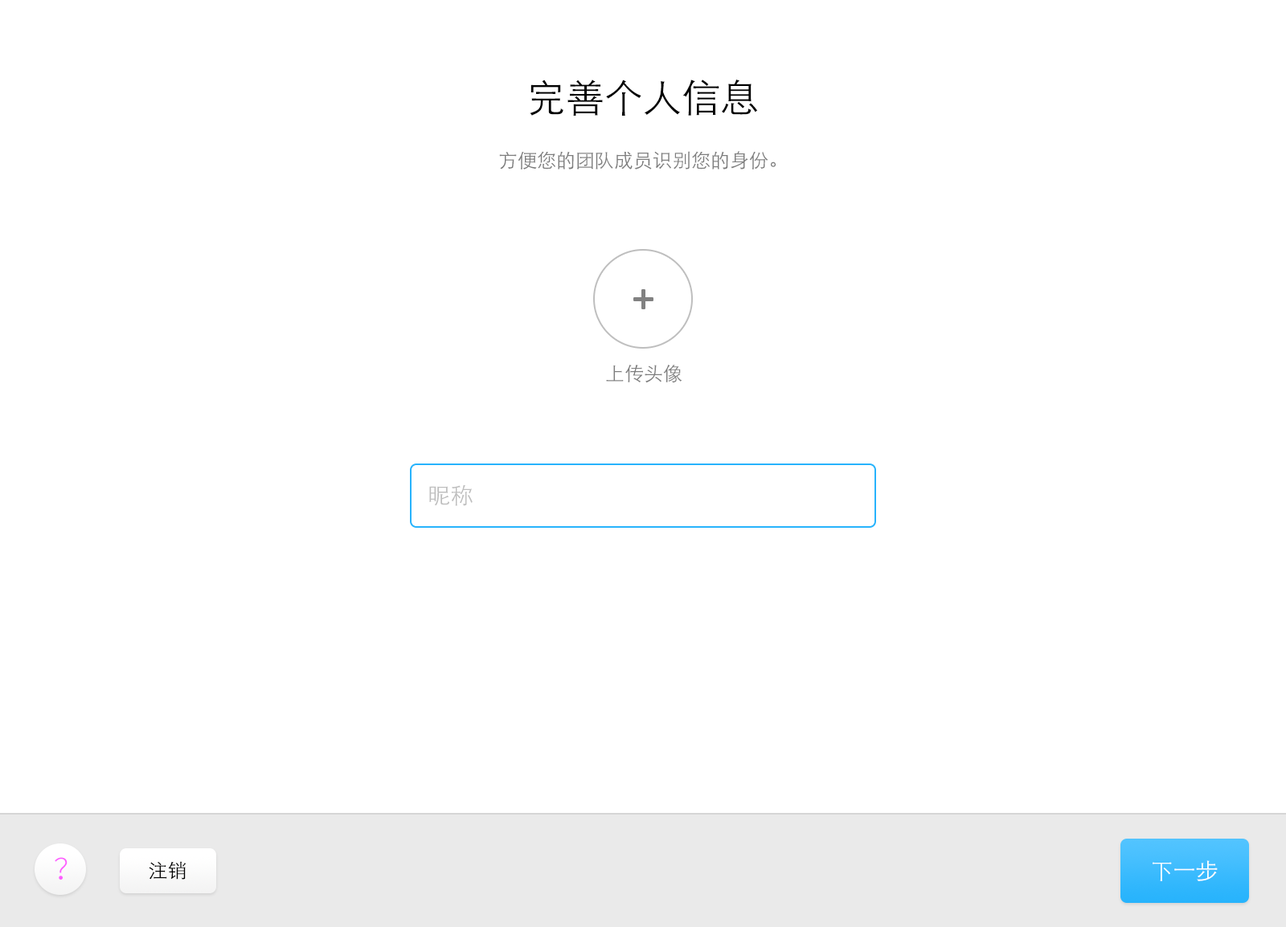
<style>
.page{position:relative;width:1286px;height:927px;background:#ffffff}
.page>*{position:absolute;margin:0}
.t1{font:38.6px "STHeitiSC-Light";color:#000000}
.t2{font:19.3px "STHeitiSC-Light";color:#7d7d7d}
.t3{font:22.5px "STHeitiSC-Light";color:#bebebe}
.t4{font:28.9px "SourceHanSansCN-Light";color:#fd5eff}
.t5{font:19.3px "STHeitiSC-Light";color:#000000}
.t6{font:22.5px "STHeitiSC-Light";color:#ffffff}
</style>
<div class="page">
<p class="t1" style="left:530px;top:80px;width:228px;height:36px">完善个人信息</p>
<p class="t2" style="left:499px;top:151px;width:276px;height:19px">方便您的团队成员识别您的身份。</p>
<p class="t2" style="left:606px;top:365px;width:76px;height:18px">上传头像</p>
<p class="t3" style="left:429px;top:485px;width:44px;height:21px">昵称</p>
<p class="t4" style="left:55px;top:857px;width:13px;height:23px">？</p>
<p class="t5" style="left:149px;top:861px;width:37px;height:19px">注销</p>
<p class="t6" style="left:1152px;top:861px;width:65px;height:21px">下一步</p>
</div>
